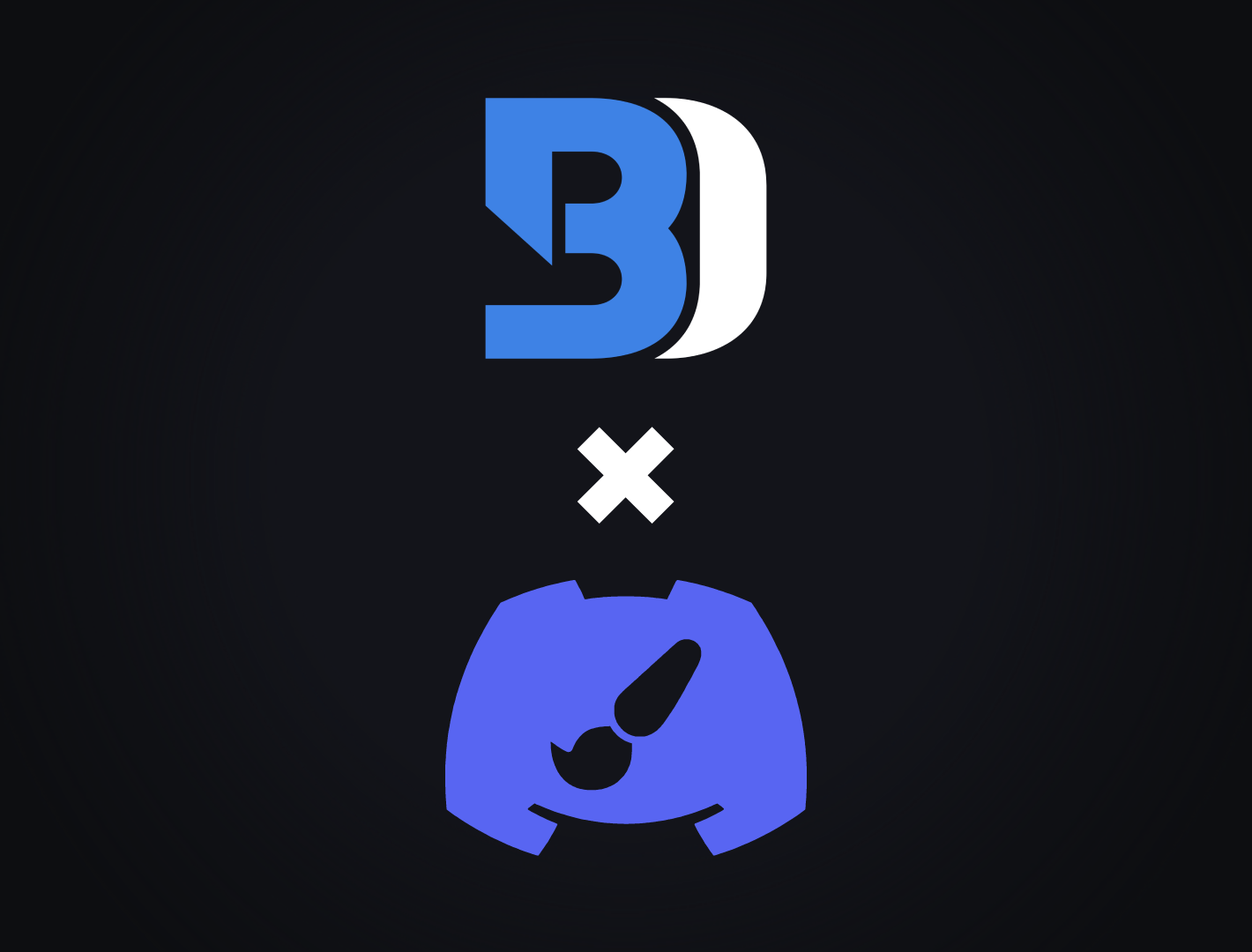
<style>
.page{position:relative;width:1252px;height:952px;background:#13141a}
.page>*{position:absolute;margin:0}
.t1{font:190.5px "DejaVuSansMono";color:#ffffff}
</style>
<div class="page">
<p class="t1" style="left:577px;top:427px;width:98px;height:98px">✖</p>
</div>
